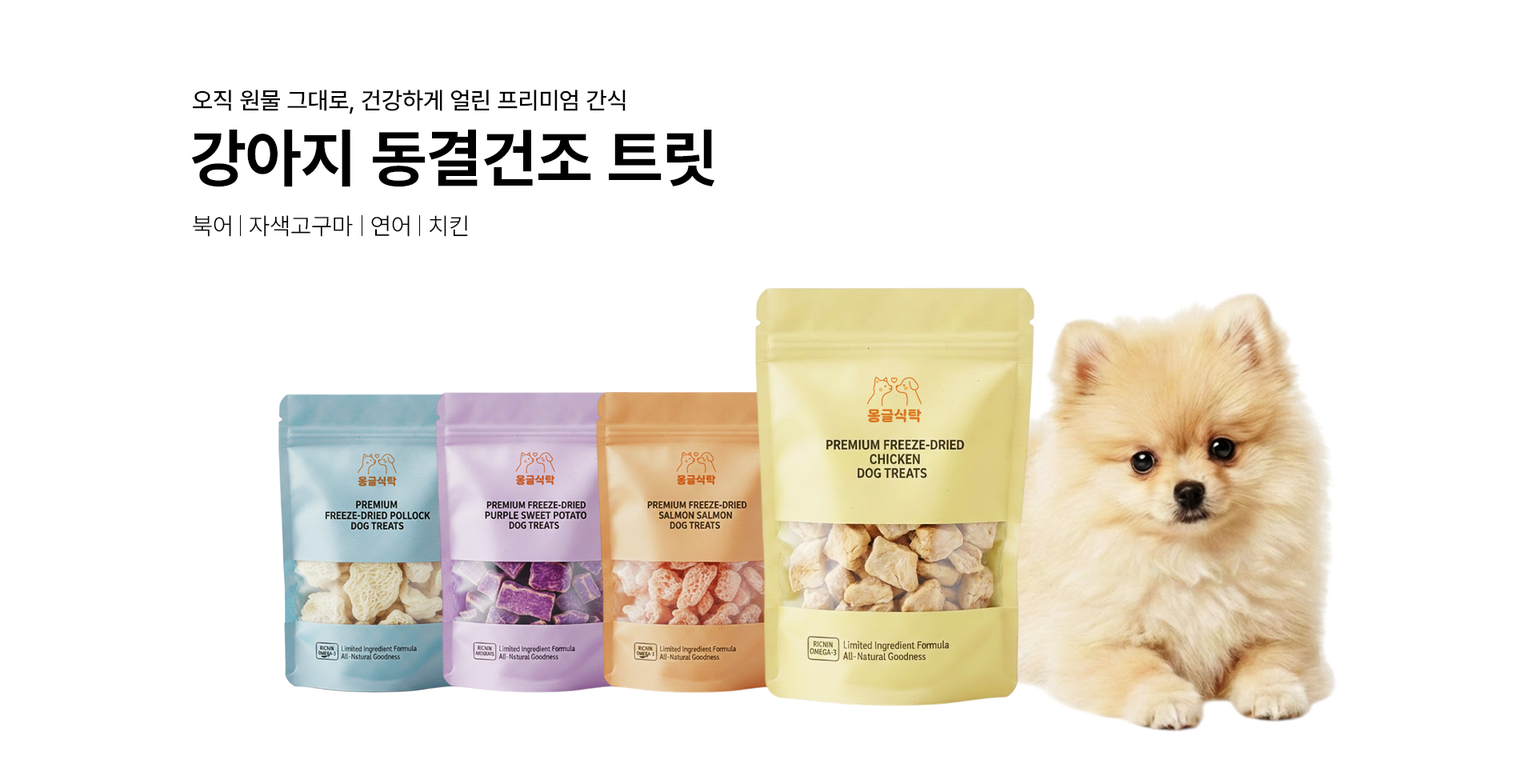
<style>
.page{position:relative;width:1536px;height:776px;background:#ffffff}
.page>*{position:absolute;margin:0}
.t1{font:24px "Pretendard-Medium";color:#000000;text-transform:uppercase}
.t2{font:64px "Pretendard-Bold";color:#000000;text-transform:uppercase}
.t3{font:24px "Pretendard-Light";color:#000000;text-transform:uppercase}
</style>
<div class="page">
<p class="t1" style="left:193px;top:90px;width:433px;height:24px">오직 원물 그대로, 건강하게 얼린 프리미엄 간식</p>
<p class="t2" style="left:191px;top:130px;width:524px;height:57px">강아지 동결건조 트릿</p>
<p class="t3" style="left:193px;top:215px;width:38px;height:22px">북어</p>
<p class="t3" style="left:249px;top:215px;width:104px;height:22px">자색고구마</p>
<p class="t3" style="left:371px;top:215px;width:39px;height:22px">연어</p>
<p class="t3" style="left:429px;top:215px;width:39px;height:22px">치킨</p>
</div>
